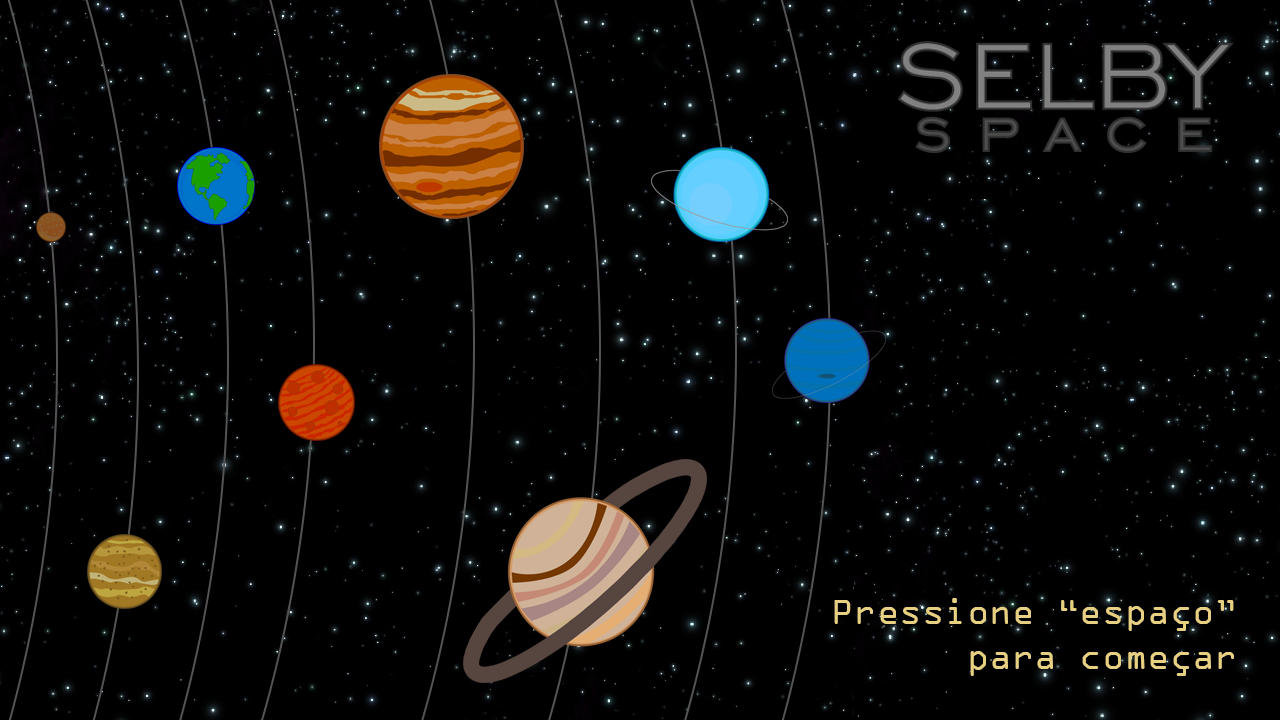
<style>
.page{position:relative;width:1280px;height:720px;background:#000000}
.page>*{position:absolute;margin:0}
.t1{font:37.3px "OCRAExtended";color:#e7d081}
</style>
<div class="page">
<p class="t1" style="left:834px;top:598px;width:400px;height:78px;text-align:right">Pressione “espaço”<br>para começar</p>
</div>
